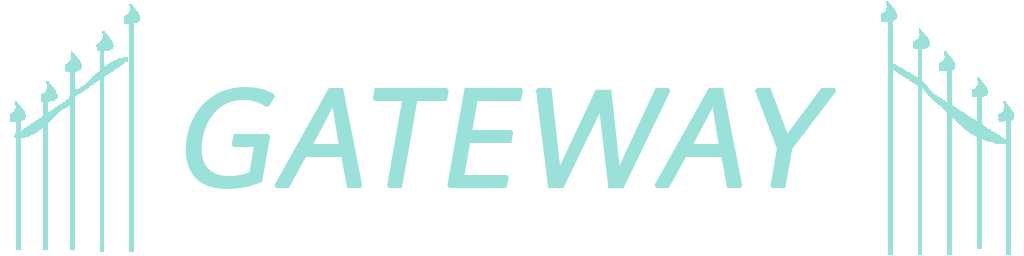
<style>
.page{position:relative;width:1024px;height:256px;background:#ffffff}
.page>*{position:absolute;margin:0}
.t1{font:133.3px "Oxygen-Regular";letter-spacing:0.05em;color:#99e1d9;font-weight:bold;font-style:italic}
</style>
<div class="page">
<p class="t1" style="left:185px;top:87px;width:651px;height:102px">GATEWAY</p>
</div>
